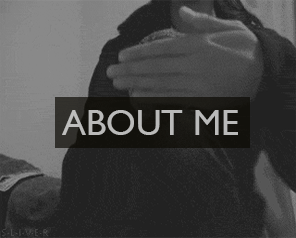
<style>
.page{position:relative;width:296px;height:238px}
.page>*{position:absolute;margin:0}
.t1{font:36px "GillSans";color:#babab9}
</style>
<div class="page">
<p class="t1" style="left:62px;top:110px;width:176px;height:25px">ABOUT ME</p>
</div>
